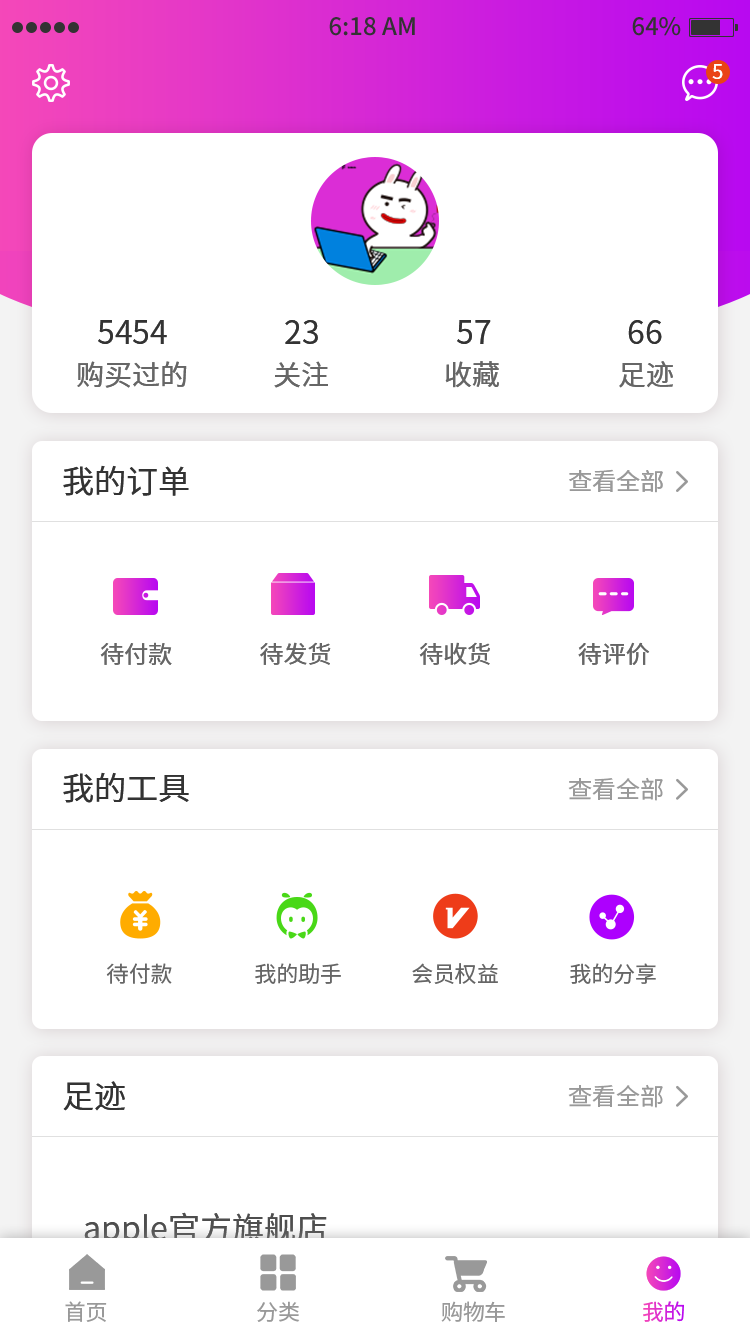
<style>
.page{position:relative;width:750px;height:1334px;background:#ffffff}
.page>*{position:absolute;margin:0}
.t1{font:20px "NotoSansHans-Regular";color:#fffefe}
.t2{font:32px "NotoSansHans-Regular";color:#333333}
.t3{font:28px "NotoSansHans-Regular";color:#666666}
.t4{font:24px "NotoSansHans-Regular";color:#999999}
.t5{font:24px "NotoSansHans-Regular";color:#666666}
.t6{font:23.8px "NotoSansHans-Regular";color:#999999}
.t7{font:21.9px "NotoSansHans-Regular";color:#666666}
.t8{font:32px "NotoSansHans-Regular";color:#4d4d4d}
.t9{font:22px "NotoSansHans-Regular";letter-spacing:-0.02em;color:#999999}
.t10{font:22px "NotoSansHans-Regular";letter-spacing:-0.02em;color:#db2dd0}
</style>
<div class="page">
<p class="t1" style="left:712px;top:64px;width:11px;height:15px">5</p>
<p class="t2" style="left:98px;top:320px;width:69px;height:24px">5454</p>
<p class="t2" style="left:285px;top:320px;width:33px;height:24px">23</p>
<p class="t2" style="left:457px;top:320px;width:34px;height:24px">57</p>
<p class="t2" style="left:628px;top:320px;width:34px;height:24px">66</p>
<p class="t3" style="left:77px;top:361px;width:110px;height:27px">购买过的</p>
<p class="t3" style="left:274px;top:361px;width:54px;height:27px">关注</p>
<p class="t3" style="left:445px;top:361px;width:54px;height:27px">收藏</p>
<p class="t3" style="left:619px;top:361px;width:54px;height:27px">足迹</p>
<p class="t2" style="left:63px;top:465px;width:126px;height:31px">我的订单</p>
<p class="t4" style="left:569px;top:469px;width:94px;height:24px">查看全部</p>
<p class="t5" style="left:100px;top:642px;width:72px;height:23px">待付款</p>
<p class="t5" style="left:260px;top:642px;width:71px;height:23px">待发货</p>
<p class="t5" style="left:419px;top:642px;width:71px;height:23px">待收货</p>
<p class="t5" style="left:578px;top:642px;width:72px;height:23px">待评价</p>
<p class="t2" style="left:63px;top:772px;width:126px;height:31px">我的工具</p>
<p class="t6" style="left:568px;top:777px;width:95px;height:24px">查看全部</p>
<p class="t7" style="left:106px;top:963px;width:66px;height:21px">待付款</p>
<p class="t7" style="left:255px;top:963px;width:86px;height:21px">我的助手</p>
<p class="t7" style="left:412px;top:963px;width:86px;height:21px">会员权益</p>
<p class="t7" style="left:570px;top:963px;width:86px;height:21px">我的分享</p>
<p class="t2" style="left:63px;top:1081px;width:62px;height:30px">足迹</p>
<p class="t6" style="left:568px;top:1084px;width:95px;height:24px">查看全部</p>
<p class="t8" style="left:84px;top:1212px;width:243px;height:35px">apple官方旗舰店</p>
<p class="t9" style="left:65px;top:1301px;width:42px;height:21px">首页</p>
<p class="t9" style="left:257px;top:1301px;width:43px;height:21px">分类</p>
<p class="t9" style="left:441px;top:1301px;width:64px;height:21px">购物车</p>
<p class="t10" style="left:643px;top:1301px;width:41px;height:21px">我的</p>
</div>
